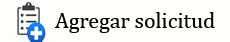
<style>
.page{position:relative;width:230px;height:42px;background:#fdfdfa}
.page>*{position:absolute;margin:0}
.t1{font:22px "CambriaMath";color:#000000}
</style>
<div class="page">
<p class="t1" style="left:54px;top:12px;width:161px;height:21px">Agregar solicitud</p>
</div>
